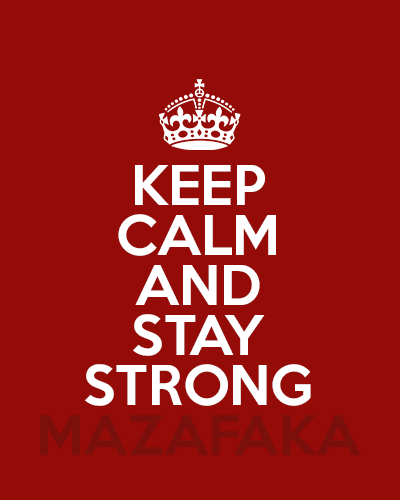
<style>
.page{position:relative;width:400px;height:500px;background:#940b07}
.page>*{position:absolute;margin:0}
.t1{font:49.9px/49.9px "KeepCalm-Medium";color:#ffffff}
.t2{font:49.9px/49.9px "KeepCalm-Medium";color:#7b0f0b}
</style>
<div class="page">
<p class="t1" style="left:40px;top:165px;width:321px;height:290px;text-align:center">KEEP<br>CALM<br>AND<br>STAY<br>STRONG<br><span class="t2">MAZAFAKA</span></p>
</div>
